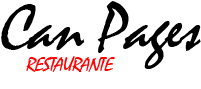
<style>
.page{position:relative;width:201px;height:89px;background:#ffffff}
.page>*{position:absolute;margin:0}
.t1{font:65.8px "Mistral";letter-spacing:-0.02em;color:#000000;font-style:italic}
.t2{font:19.8px "Mistral";letter-spacing:-0.02em;color:#ff0000;font-style:italic}
</style>
<div class="page">
<p class="t1" style="left:1px;top:1px;width:200px;height:68px">Can Pages</p>
<p class="t2" style="left:26px;top:56px;width:89px;height:16px">RESTAURANTE</p>
</div>
